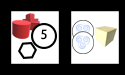
<style>
.page{position:relative;width:125px;height:75px;background:#000000}
.page>*{position:absolute;margin:0}
.t1{font:12.5px "KozGoPr6N-Bold";color:#000000}
</style>
<div class="page">
<p class="t1" style="left:41px;top:29px;width:6px;height:11px">5</p>
</div>
